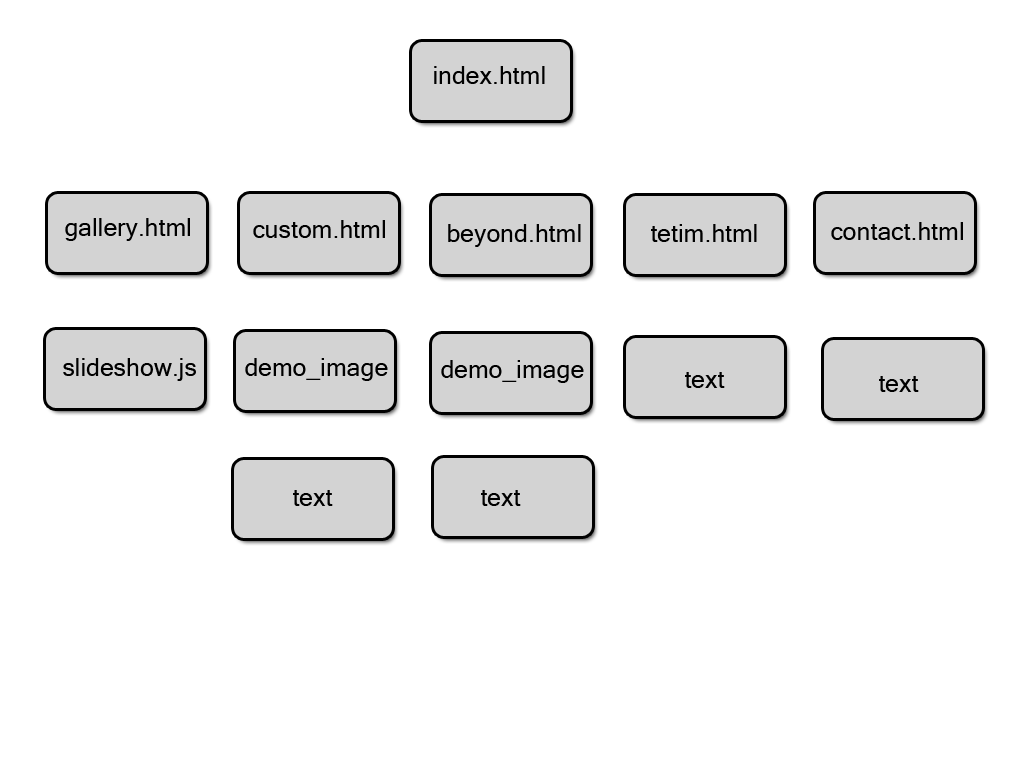
<style>
.page{position:relative;width:1024px;height:768px;background:#ffffff}
.page>*{position:absolute;margin:0}
.t1{font:24px "Mangal";color:#000000}
</style>
<div class="page">
<p class="t1" style="left:434px;top:66px;width:111px;height:18px">index.html</p>
<p class="t1" style="left:65px;top:218px;width:125px;height:23px">gallery.html</p>
<p class="t1" style="left:253px;top:220px;width:132px;height:18px">custom.html</p>
<p class="t1" style="left:831px;top:222px;width:132px;height:18px">contact.html</p>
<p class="t1" style="left:448px;top:224px;width:133px;height:23px">beyond.html</p>
<p class="t1" style="left:651px;top:224px;width:106px;height:18px">tetim.html</p>
<p class="t1" style="left:63px;top:358px;width:133px;height:23px">slideshow.js</p>
<p class="t1" style="left:245px;top:358px;width:143px;height:23px">demo_image</p>
<p class="t1" style="left:441px;top:360px;width:143px;height:23px">demo_image</p>
<p class="t1" style="left:685px;top:372px;width:40px;height:16px">text</p>
<p class="t1" style="left:879px;top:376px;width:40px;height:16px">text</p>
<p class="t1" style="left:293px;top:490px;width:40px;height:16px">text</p>
<p class="t1" style="left:481px;top:490px;width:40px;height:16px">text</p>
</div>
